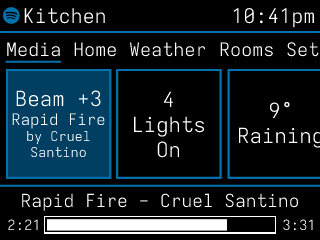
<style>
.page{position:relative;width:320px;height:240px;background:#000000}
.page>*{position:absolute;margin:0}
.t1{font:20px "Iosevka-Light-Extended";color:#ffffff}
.t2{font:18.5px "Iosevka-Light-Extended";color:#ffffff}
.t3{font:13.5px "Iosevka-Light-Extended";color:#ffffff}
.t4{font:20.7px "Iosevka-Light-Extended";color:#ffffff}
.t5{font:15.7px "Iosevka-Light-Extended";color:#ffffff}
.t6{font:17.9px "Iosevka-Light-Extended";color:#ffffff}
.t7{font:14px "Iosevka-Light-Extended";color:#ffffff}
</style>
<div class="page">
<p class="t1" style="left:24px;top:8px;width:81px;height:16px">Kitchen</p>
<p class="t1" style="left:233px;top:8px;width:81px;height:20px">10:41pm</p>
<p class="t2" style="left:7px;top:42px;width:53px;height:15px">Media</p>
<p class="t2" style="left:74px;top:42px;width:42px;height:15px">Home</p>
<p class="t2" style="left:130px;top:42px;width:76px;height:15px">Weather</p>
<p class="t2" style="left:220px;top:42px;width:53px;height:15px">Rooms</p>
<p class="t3" style="left:12px;top:90px;width:93px;height:67px;text-align:center"><span class="t4">Beam +3<br></span><span class="t5">Rapid Fire<br></span>by Cruel Santino</p>
<p class="t4" style="left:134px;top:91px;width:70px;height:67px;text-align:center">4 Lights On</p>
<p class="t6" style="left:22px;top:193px;width:276px;height:18px">Rapid Fire - Cruel Santino</p>
<p class="t7" style="left:8px;top:219px;width:30px;height:12px">2:21</p>
<p class="t7" style="left:283px;top:219px;width:30px;height:12px">3:31</p>
</div>
